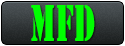
<style>
.page{position:relative;width:125px;height:46px}
.page>*{position:absolute;margin:0}
.t1{font:48px "StencilStd";color:#00ff00;scale:0.6 1}
</style>
<div class="page">
<p class="t1" style="left:31px;top:5px;width:64px;height:36px">mfd</p>
</div>
